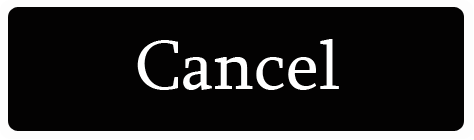
<style>
.page{position:relative;width:474px;height:140px;background:#030202}
.page>*{position:absolute;margin:0}
.t1{font:72px "Sylfaen";color:#ffffff}
</style>
<div class="page">
<p class="t1" style="left:137px;top:39px;width:202px;height:51px">Cancel</p>
</div>
